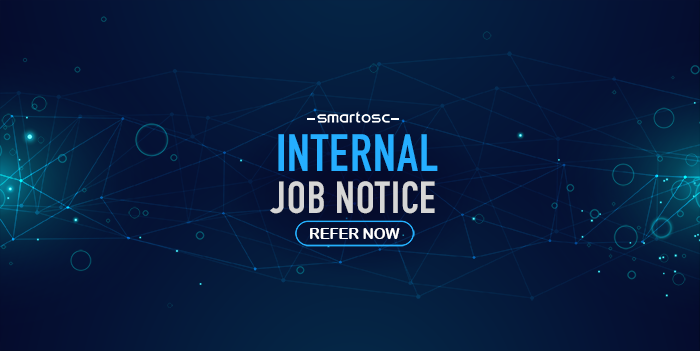
<style>
.page{position:relative;width:700px;height:351px}
.page>*{position:absolute;margin:0}
.t1{font:51.7px "DINCondensed-Bold";letter-spacing:0.02em;color:#25aeff}
.t2{font:44.3px "DINCondensed-Bold";letter-spacing:0.02em;color:#d6d6d6}
.t3{font:14.8px "ArialRoundedMTBold";color:#ffffff}
</style>
<div class="page">
<p class="t1" style="left:278px;top:134px;width:160px;height:37px">INTERNAL</p>
<p class="t2" style="left:270px;top:181px;width:165px;height:33px">JOB NOTICE</p>
<p class="t3" style="left:310px;top:228px;width:90px;height:11px">REFER NOW</p>
</div>
